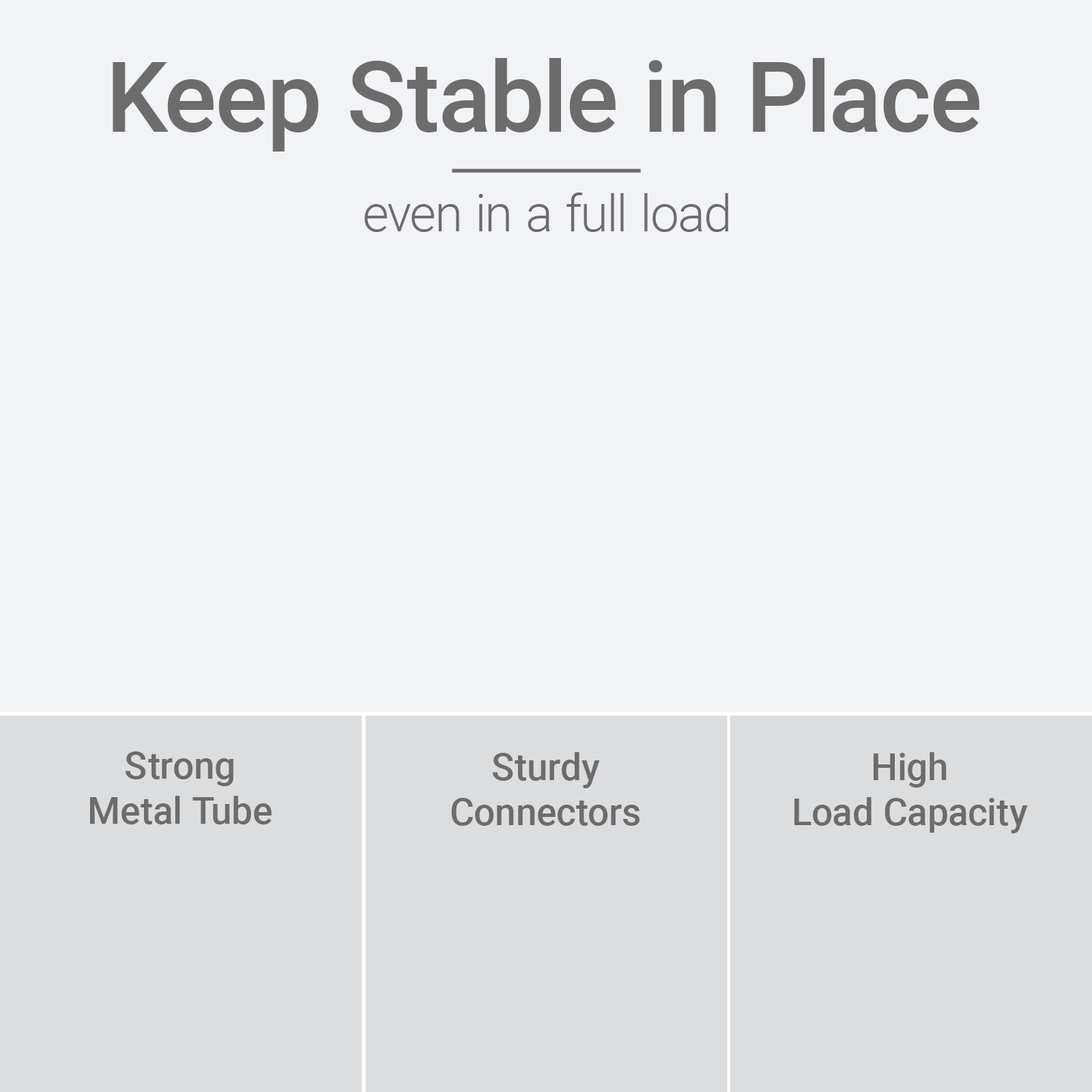
<style>
.page{position:relative;width:1092px;height:1092px;background:#f2f3f6}
.page>*{position:absolute;margin:0}
.t1{font:98.3px "Roboto-Medium";color:#6c6c6c}
.t2{font:51px "Roboto-Light";color:#6c6c6c}
.t3{font:37.9px/45.1px "Roboto-Medium";color:#6c6c6c}
</style>
<div class="page">
<p class="t1" style="left:113px;top:58px;width:866px;height:94px">Keep Stable in Place</p>
<p class="t2" style="left:364px;top:192px;width:364px;height:40px">even in a full load</p>
<p class="t3" style="left:90px;top:751px;width:182px;height:73px;text-align:center">Strong<br>Metal Tube</p>
<p class="t3" style="left:451px;top:752px;width:188px;height:74px;text-align:center">Sturdy<br>Connectors</p>
<p class="t3" style="left:794px;top:752px;width:234px;height:81px;text-align:center">High<br>Load Capacity</p>
</div>
